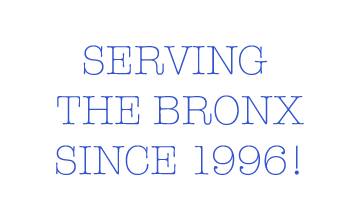
<style>
.page{position:relative;width:360px;height:220px;background:#ffffff}
.page>*{position:absolute;margin:0}
.t1{font:41.7px "AmericanTypewriter-Light";color:#3454d1}
</style>
<div class="page">
<p class="t1" style="left:56px;top:45px;width:248px;height:130px;text-align:center">SERVING <br>THE BRONX<br>SINCE 1996!</p>
</div>
